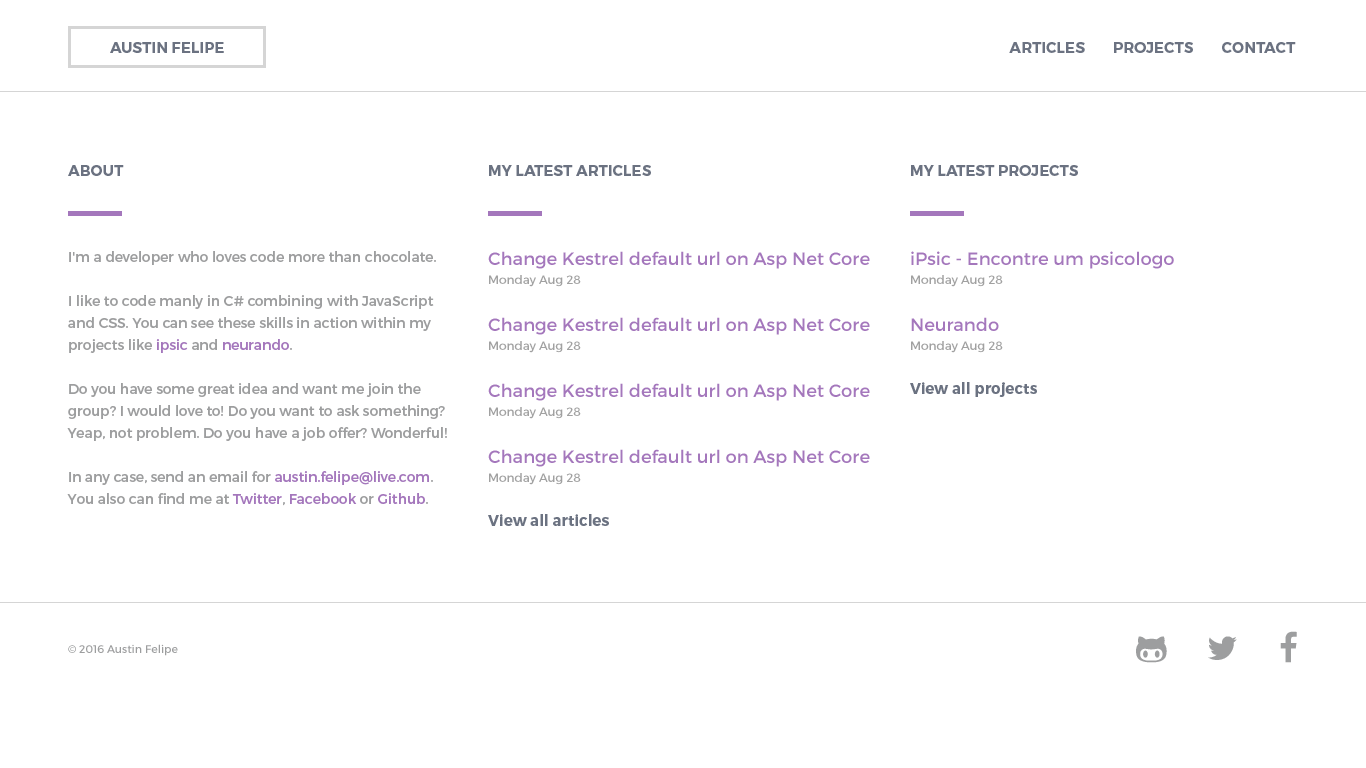
<style>
.page{position:relative;width:1366px;height:768px;background:#ffffff}
.page>*{position:absolute;margin:0}
.t1{font:15.1px "Montserrat-Bold";color:#6b7281;text-transform:uppercase}
.t2{font:14px/22px "Montserrat-Regular";color:#9d9e9f}
.t3{font:14px/22px "Montserrat-Regular";color:#a477bc}
.t4{font:18px "Montserrat-Regular";color:#a477bc}
.t5{font:12px "Montserrat-Regular";color:#a1a1a1}
.t6{font:15.1px "Montserrat-Bold";color:#6b7281}
.t7{font:11px "Montserrat-Regular";color:#9d9e9f}
</style>
<div class="page">
<p class="t1" style="left:110px;top:42px;width:114px;height:11px">Austin Felipe</p>
<p class="t1" style="left:1009px;top:42px;width:287px;height:11px">Articles        projects        Contact</p>
<p class="t1" style="left:68px;top:165px;width:56px;height:11px">about</p>
<p class="t1" style="left:489px;top:165px;width:162px;height:11px">My latest articles</p>
<p class="t1" style="left:911px;top:165px;width:167px;height:11px">My latest projects</p>
<p class="t2" style="left:67px;top:251px;width:380px;height:255px">I'm a developer who loves code more than chocolate.<br><br>I like to code manly in C# combining with JavaScript and CSS. You can see these skills in action within my projects like <span class="t3">ipsic </span>and <span class="t3">neurando</span>.<br><br>Do you have some great idea and want me join the group? I would love to! Do you want to ask something? Yeap, not problem. Do you have a job offer? Wonderful!<br><br>In any case, send an email for <span class="t3">austin.felipe@live.com</span>. You also can find me at <span class="t3">Twitter</span>, <span class="t3">Facebook </span>or <span class="t3">Github</span>.</p>
<p class="t4" style="left:488px;top:251px;width:382px;height:18px">Change Kestrel default url on Asp Net Core</p>
<p class="t4" style="left:911px;top:251px;width:263px;height:18px">iPsic - Encontre um psicologo</p>
<p class="t5" style="left:489px;top:275px;width:92px;height:12px">Monday Aug 28</p>
<p class="t5" style="left:911px;top:275px;width:92px;height:12px">Monday Aug 28</p>
<p class="t4" style="left:488px;top:317px;width:382px;height:18px">Change Kestrel default url on Asp Net Core</p>
<p class="t4" style="left:911px;top:317px;width:88px;height:14px">Neurando</p>
<p class="t5" style="left:489px;top:341px;width:92px;height:12px">Monday Aug 28</p>
<p class="t5" style="left:911px;top:341px;width:92px;height:12px">Monday Aug 28</p>
<p class="t4" style="left:488px;top:383px;width:382px;height:18px">Change Kestrel default url on Asp Net Core</p>
<p class="t6" style="left:910px;top:382px;width:127px;height:15px">View all projects</p>
<p class="t5" style="left:489px;top:407px;width:92px;height:12px">Monday Aug 28</p>
<p class="t4" style="left:488px;top:449px;width:382px;height:18px">Change Kestrel default url on Asp Net Core</p>
<p class="t5" style="left:489px;top:473px;width:92px;height:12px">Monday Aug 28</p>
<p class="t6" style="left:488px;top:514px;width:121px;height:12px">View all articles</p>
<p class="t7" style="left:68px;top:644px;width:110px;height:12px">© 2016 Austin Felipe</p>
</div>
